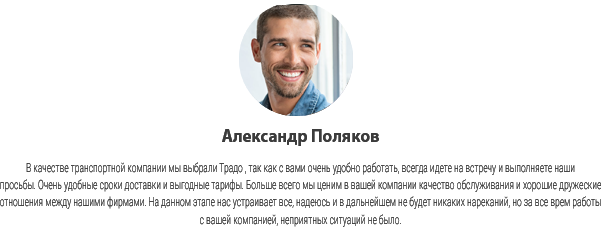
<style>
.page{position:relative;width:601px;height:241px;background:#ffffff}
.page>*{position:absolute;margin:0}
.t1{font:18px "MyriadPro-Bold";color:#3c3c3c;scale:0.95 1}
.t2{font:12.7px/12.5px "Roboto-Light";color:#3c3c3c;scale:0.67 1}
</style>
<div class="page">
<p class="t1" style="left:222px;top:129px;width:157px;height:17px">Александр Поляков</p>
<p class="t2" style="left:0px;top:162px;width:602px;height:65px;text-align:center">В качестве транспортной компании мы выбрали Традо , так как с вами очень удобно работать, всегда идете на встречу и выполняете наши<br>просьбы. Очень удобные сроки доставки и выгодные тарифы. Больше всего мы ценим в вашей компании качество обслуживания и хорошие дружеские<br>отношения между нашими фирмами. На данном этапе нас устраивает все, надеюсь и в дальнейшем не будет никаких нареканий, но за все врем работы<br>с вашей компанией, неприятных ситуаций не было.</p>
</div>
